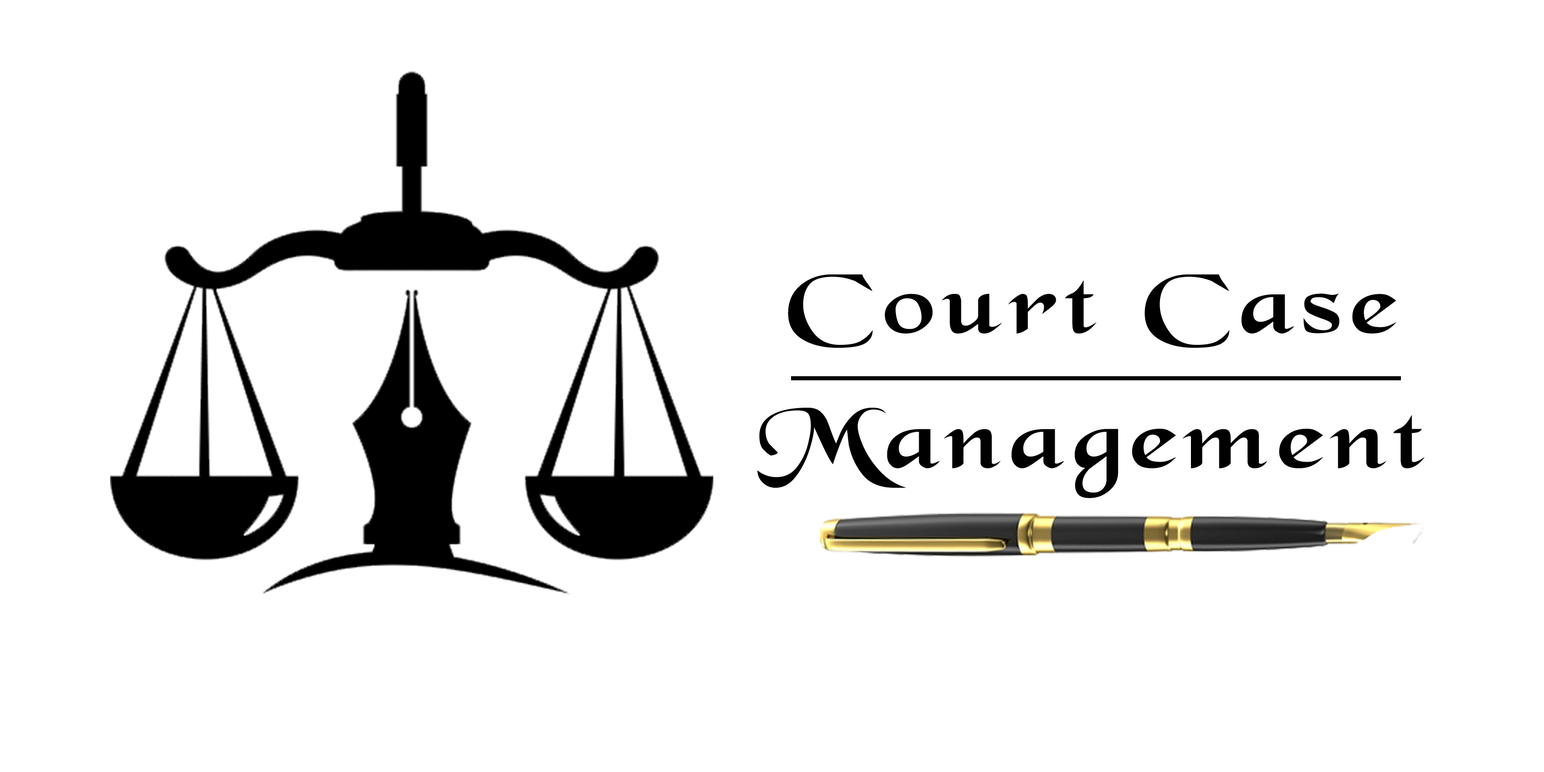
<style>
.page{position:relative;width:1544px;height:772px;background:#ffffff}
.page>*{position:absolute;margin:0}
.t1{font:90px/134.8px "BlackChancery";letter-spacing:0.06em;color:#000000;scale:1.34 1}
</style>
<div class="page">
<p class="t1" style="left:757px;top:274px;width:668px;height:224px;text-align:center">Court Case <br>Management</p>
</div>
